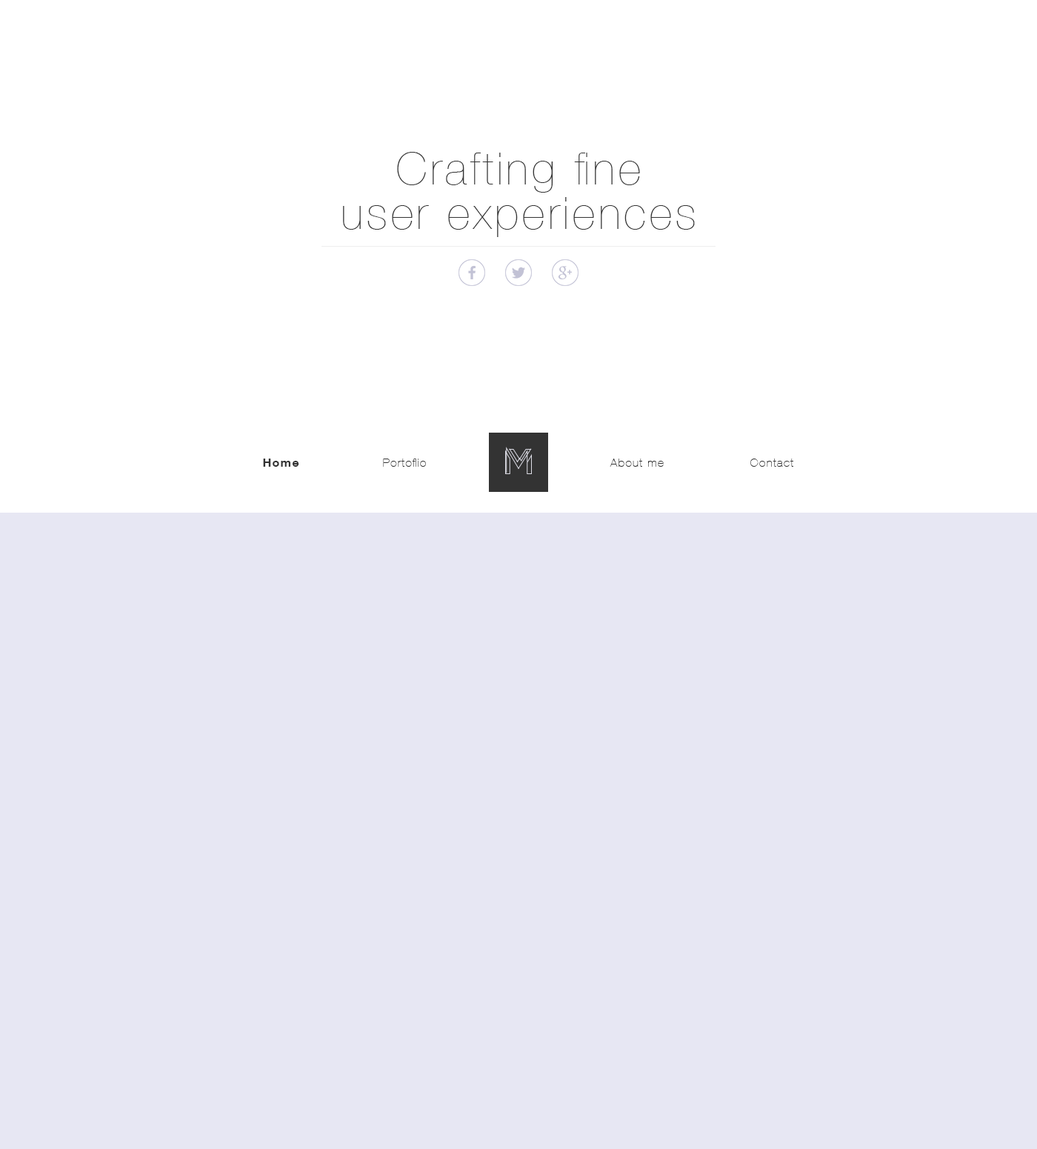
<style>
.page{position:relative;width:1037px;height:1149px;background:#e7e7f3}
.page>*{position:absolute;margin:0}
.t1{font:44.5px/44.5px "HelveticaNeueLTCom-UltLt";letter-spacing:0.08em;color:#333333}
.t2{font:11.9px "HelveticaNeueLTCom-Bd";letter-spacing:0.08em;color:#333333}
.t3{font:11.9px "HelveticaNeueLTCom-UltLt";letter-spacing:0.08em;color:#333333}
</style>
<div class="page">
<p class="t1" style="left:343px;top:152px;width:352px;height:85px;text-align:center">Crafting fine<br>user experiences</p>
<p class="t2" style="left:263px;top:459px;width:36px;height:8px">Home</p>
<p class="t3" style="left:383px;top:459px;width:43px;height:8px">Portoflio</p>
<p class="t3" style="left:610px;top:459px;width:54px;height:8px">About me</p>
<p class="t3" style="left:751px;top:459px;width:43px;height:8px">Contact</p>
</div>
